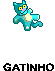
<style>
.page{position:relative;width:55px;height:71px;background:#ffffff}
.page>*{position:absolute;margin:0}
.t1{font:10.3px "Arial-BoldMT";color:#000000;scale:1.11 1}
</style>
<div class="page">
<p class="t1" style="left:3px;top:63px;width:51px;height:9px">GATINHO</p>
</div>
